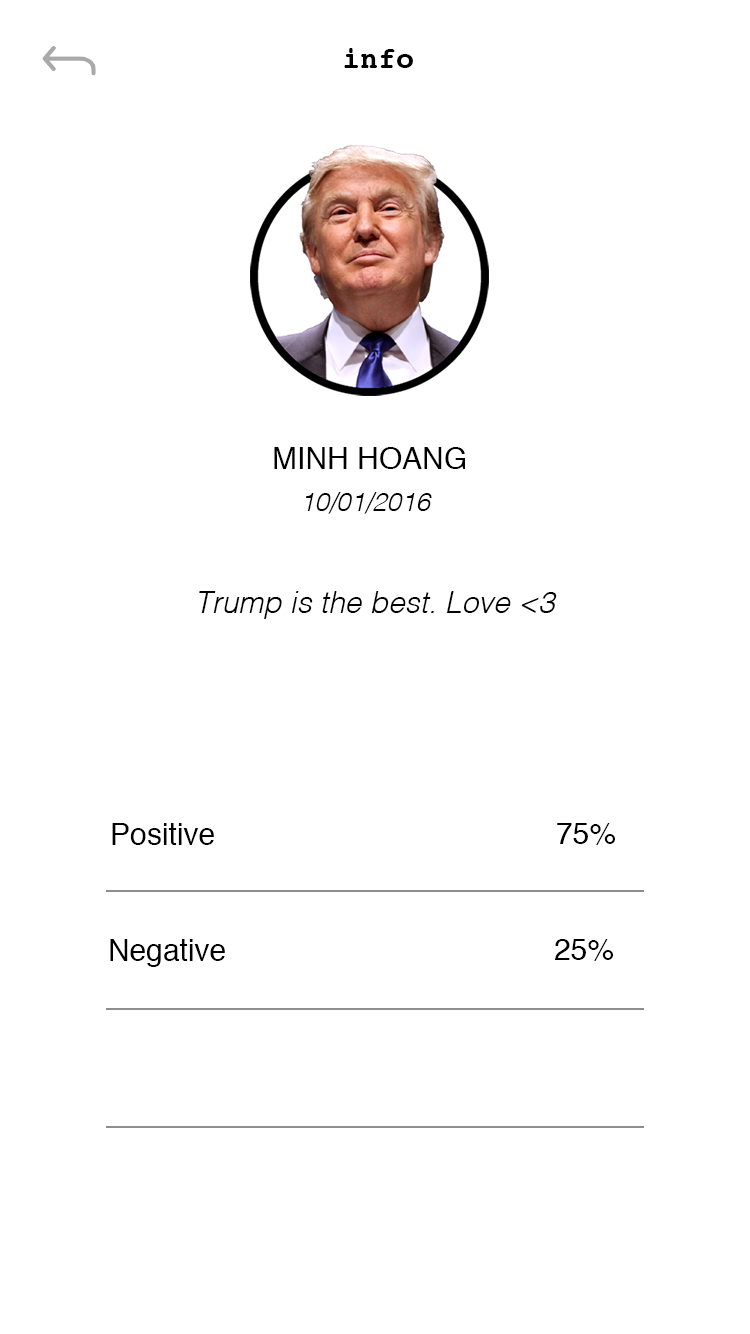
<style>
.page{position:relative;width:750px;height:1334px;background:#ffffff}
.page>*{position:absolute;margin:0}
.t1{font:30px "Courier-Bold";color:#000000}
.t2{font:30px "Helvetica";color:#000000}
.t3{font:26px "Helvetica-LightOblique";color:#000000}
.t4{font:30px "Helvetica-LightOblique";color:#000000}
</style>
<div class="page">
<p class="t1" style="left:344px;top:48px;width:69px;height:20px">info</p>
<p class="t2" style="left:274px;top:447px;width:191px;height:22px">MINH HOANG</p>
<p class="t3" style="left:306px;top:492px;width:126px;height:22px">10/01/2016</p>
<p class="t4" style="left:199px;top:591px;width:358px;height:28px">Trump is the best. Love &lt;3</p>
<p class="t2" style="left:112px;top:823px;width:102px;height:22px">Positive</p>
<p class="t2" style="left:557px;top:823px;width:58px;height:22px">75%</p>
<p class="t2" style="left:110px;top:939px;width:115px;height:28px">Negative</p>
<p class="t2" style="left:555px;top:939px;width:58px;height:22px">25%</p>
</div>
